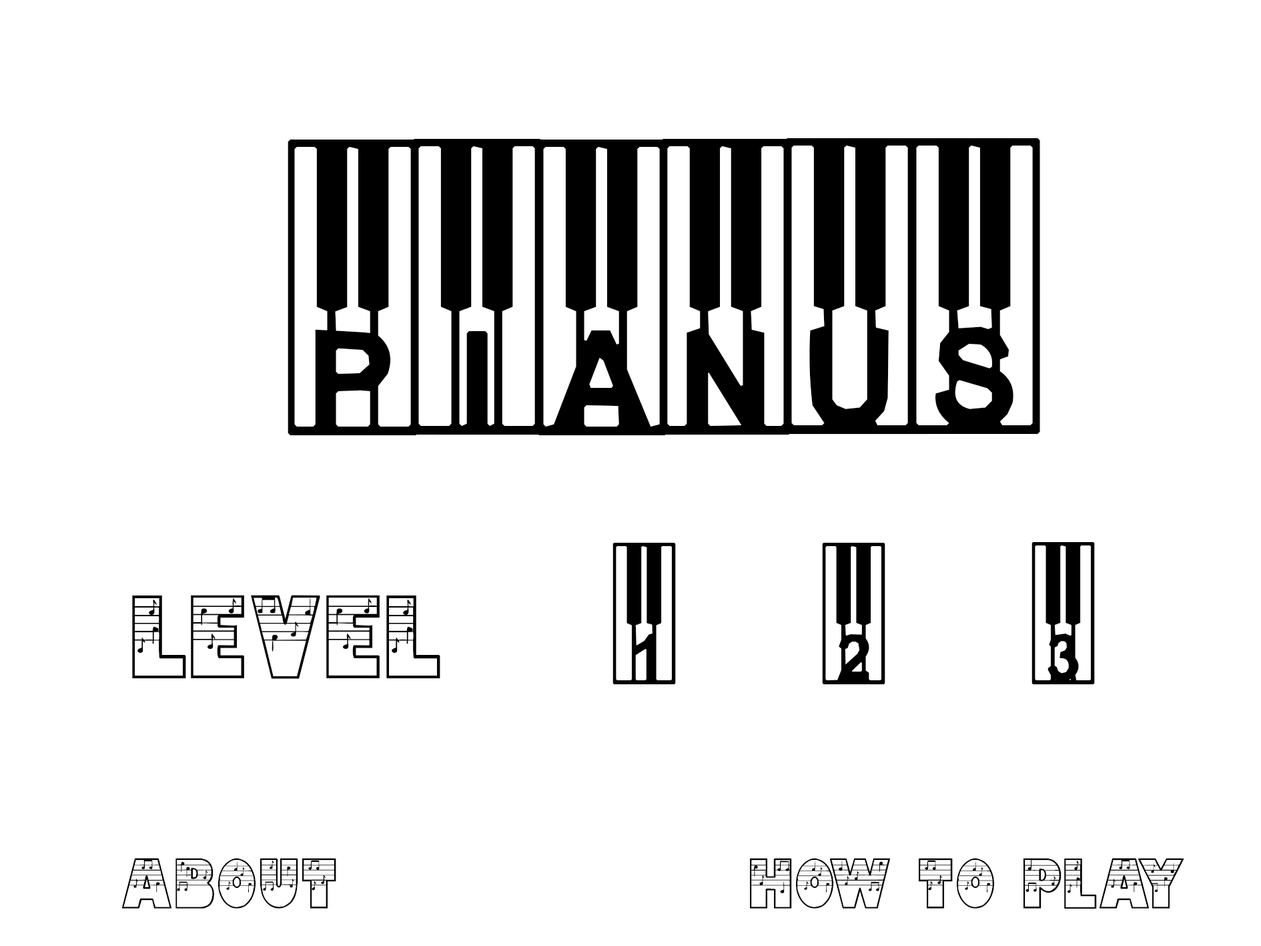
<style>
.page{position:relative;width:1261px;height:946px;background:#ffffff}
.page>*{position:absolute;margin:0}
.t1{font:417px "WilliesPiano";color:#000000}
.t2{font:200.2px "WilliesPiano";color:#000001}
.t3{font:83.4px "DTNoted";color:#000001}
.t4{font:50px "DTNoted";color:#000000}
</style>
<div class="page">
<p class="t1" style="left:288px;top:138px;width:752px;height:297px">pianus</p>
<p class="t2" style="left:132px;top:542px;width:963px;height:142px"><span class="t3">level   </span>1     2     3</p>
<p class="t4" style="left:122px;top:857px;width:214px;height:51px">About</p>
<p class="t4" style="left:750px;top:857px;width:434px;height:51px">how to play</p>
</div>
